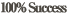
<style>
.page{position:relative;width:67px;height:13px;background:#ffffff}
.page>*{position:absolute;margin:0}
.t1{font:13px "RyuminPro-ExBold";letter-spacing:-0.12em;color:#4c4842;font-weight:bold}
</style>
<div class="page">
<p class="t1" style="left:1px;top:2px;width:66px;height:11px">100% Success</p>
</div>
